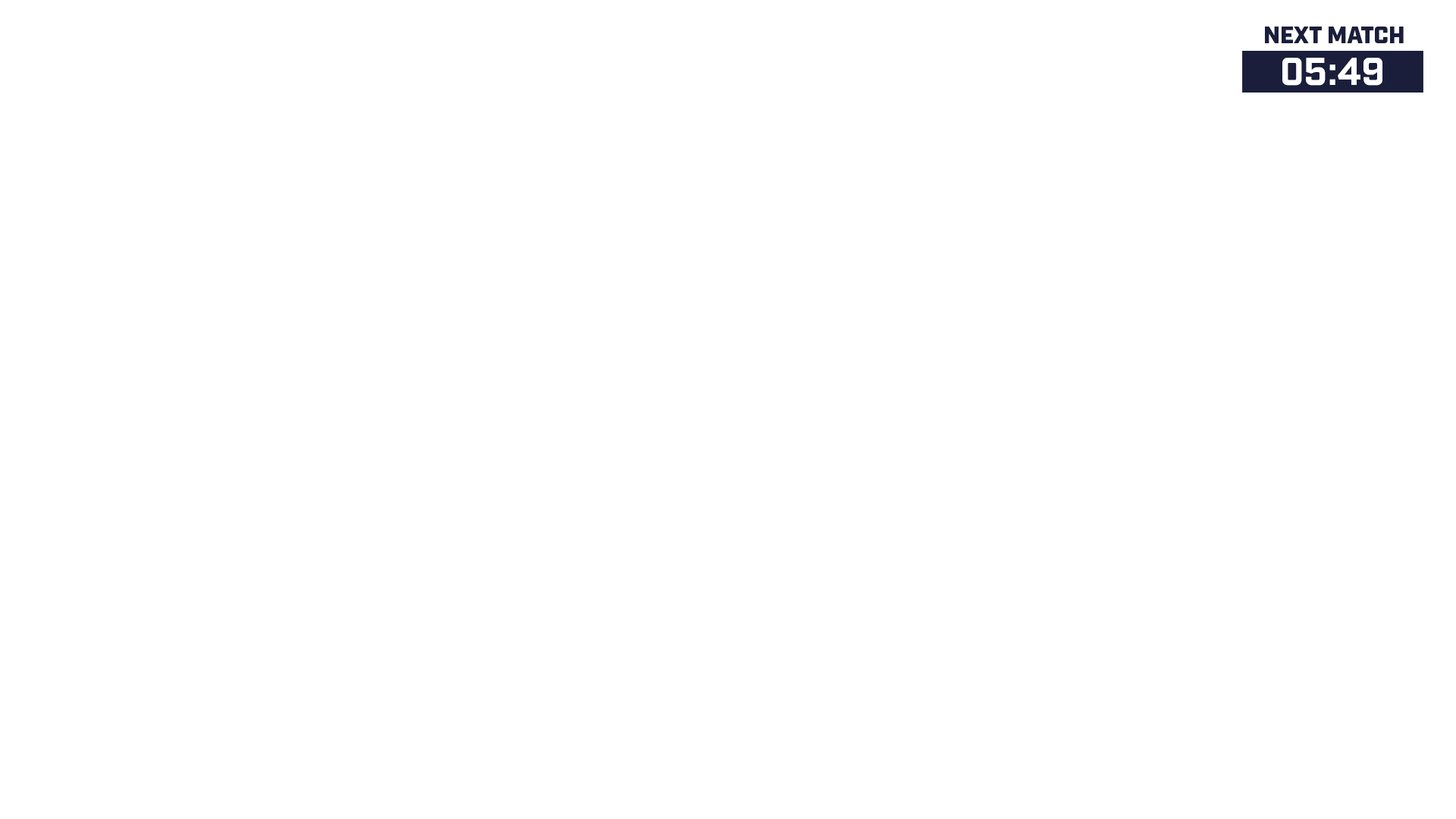
<style>
.page{position:relative;width:1456px;height:819px;background:#ffffff}
.page>*{position:absolute;margin:0}
.t1{font:23.2px "Industry-Ultra";color:#1a1e3b}
.t2{font:37.5px "Industry-Bold";color:#ffffff}
</style>
<div class="page">
<p class="t1" style="left:1265px;top:27px;width:139px;height:16px">NEXT MATCH</p>
<p class="t2" style="left:1282px;top:58px;width:100px;height:28px">05:49</p>
</div>
